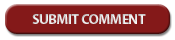
<style>
.page{position:relative;width:175px;height:40px;background:#841919}
.page>*{position:absolute;margin:0}
.t1{font:14px "MyriadPro-Bold";letter-spacing:-0.025em;color:#e2e2e2;text-transform:uppercase}
</style>
<div class="page">
<p class="t1" style="left:32px;top:14px;width:114px;height:10px">SUBMIT COMMENT</p>
</div>
